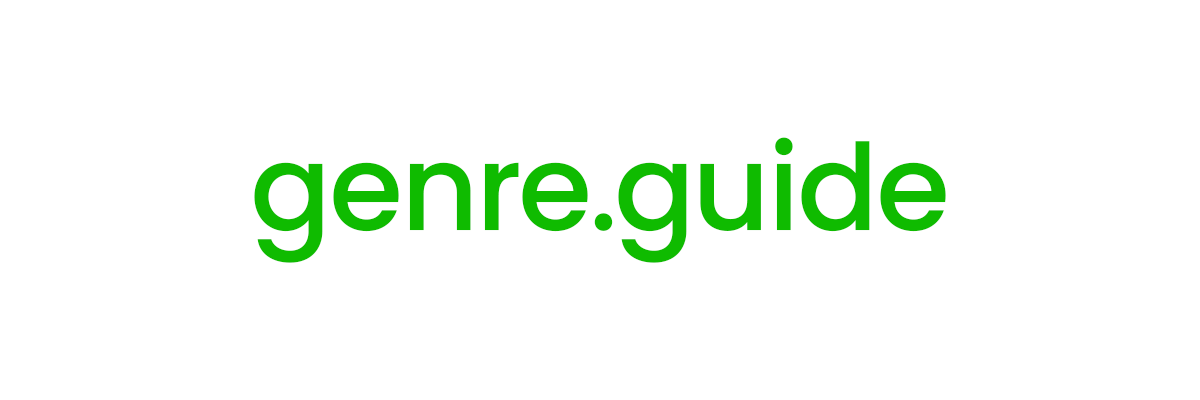
<style>
.page{position:relative;width:1200px;height:400px;background:#ffffff}
.page>*{position:absolute;margin:0}
.t1{font:120px "Poppins-Medium";color:#0fbb00}
</style>
<div class="page">
<p class="t1" style="left:254px;top:137px;width:692px;height:126px">genre.guide</p>
</div>
